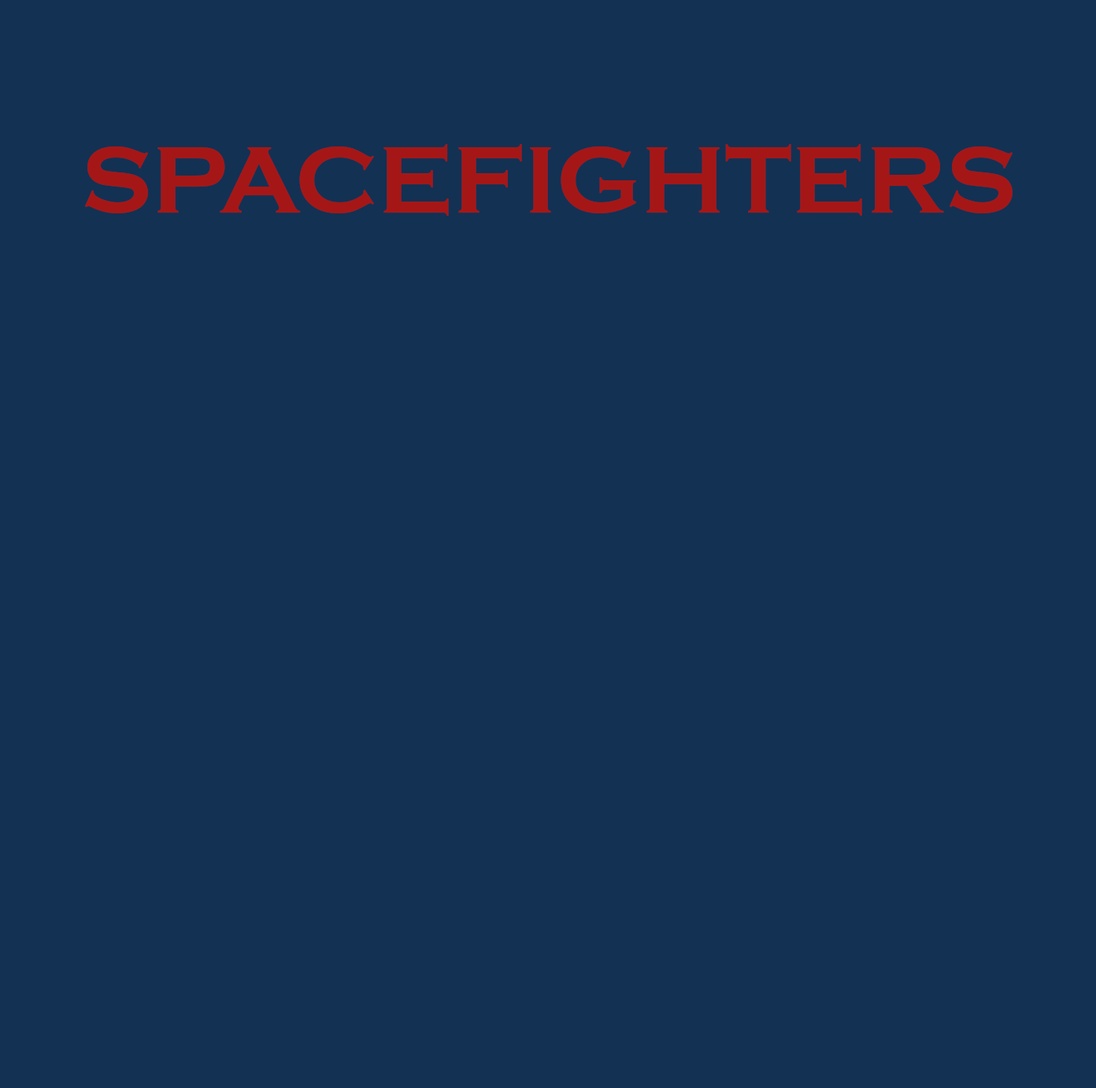
<style>
.page{position:relative;width:1096px;height:1088px;background:#133153}
.page>*{position:absolute;margin:0}
.t1{font:98.4px "CopperplateGothic-Bold";color:#a51717}
</style>
<div class="page">
<p class="t1" style="left:84px;top:144px;width:929px;height:72px">SPACEFIGHTERS</p>
</div>
